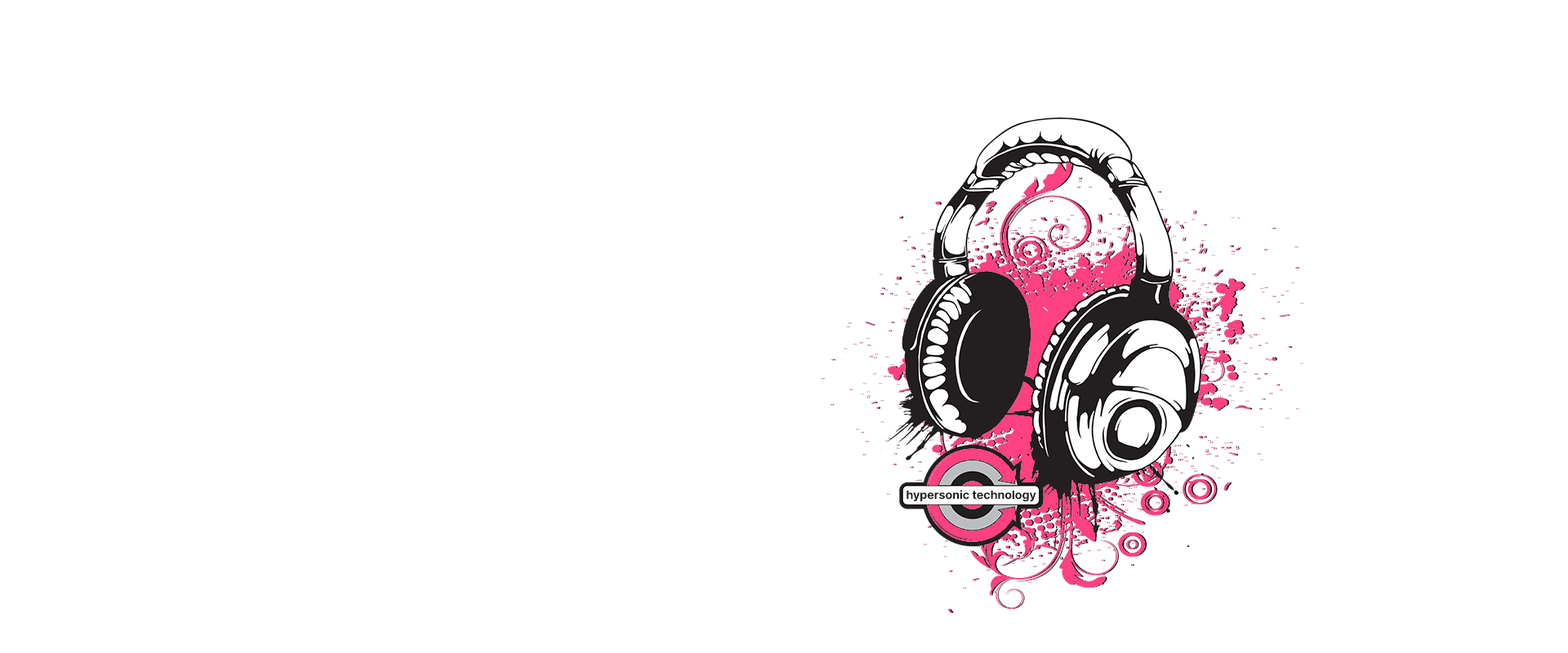
<style>
.page{position:relative;width:1568px;height:653px;background:#ffffff}
.page>*{position:absolute;margin:0}
.t1{font:11.6px "Inter-Bold";color:#231f20}
</style>
<div class="page">
<p class="t1" style="left:906px;top:490px;width:130px;height:12px">hypersonic technology</p>
</div>
